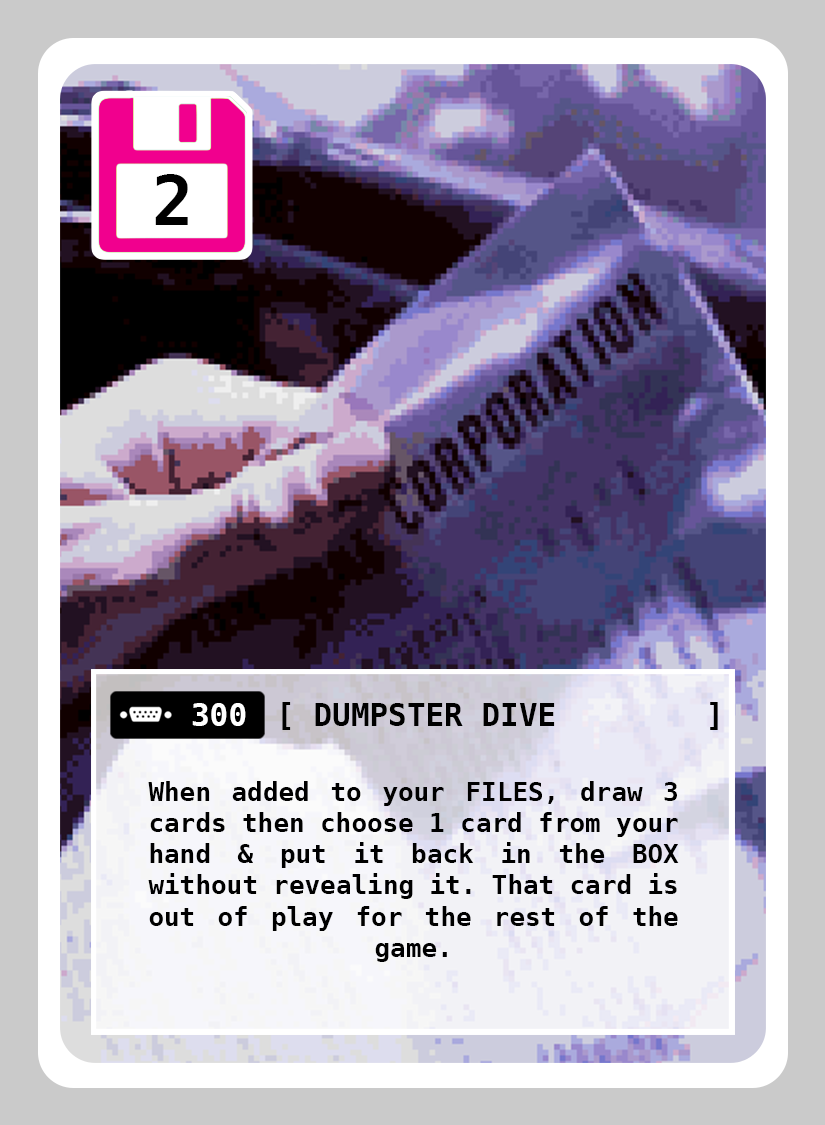
<style>
.page{position:relative;width:825px;height:1125px}
.page>*{position:absolute;margin:0}
.t1{font:69px "DejaVuSansMono-Bold";color:#000000}
.t2{font:31px "DejaVuSansMono-Bold";color:#ffffff}
.t3{font:31px "DejaVuSansMono-Bold";color:#000000}
.t4{font:26px "DejaVuSansMono-Bold";color:#000000}
</style>
<div class="page">
<p class="t1" style="left:155px;top:174px;width:33px;height:51px">2</p>
<p class="t2" style="left:192px;top:703px;width:54px;height:23px">300</p>
<p class="t3" style="left:315px;top:703px;width:240px;height:23px">DUMPSTER DIVE</p>
<p class="t4" style="left:148px;top:781px;width:531px;height:181px;text-align:justify">When added to your FILES, draw 3 cards then choose 1 card from your hand &amp; put it back in the BOX without revealing it. That card is out of play for the rest of the game.</p>
</div>
